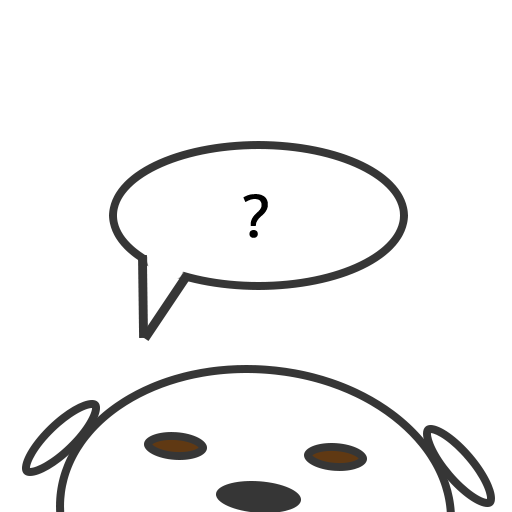
<style>
.page{position:relative;width:512px;height:512px;background:#ffffff}
.page>*{position:absolute;margin:0}
.t1{font:60px "PTSans-Caption";letter-spacing:0.29em;color:#000000}
</style>
<div class="page">
<p class="t1" style="left:243px;top:194px;width:25px;height:44px">?</p>
</div>
